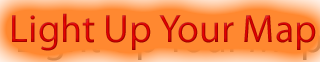
<style>
.page{position:relative;width:320px;height:62px;background:#ff8830}
.page>*{position:absolute;margin:0}
.t1{font:39.9px "MyriadPro-Regular"}
</style>
<div class="page">
<p class="t1" style="left:12px;top:13px;width:304px;height:38px">Light Up Your Map</p>
</div>
